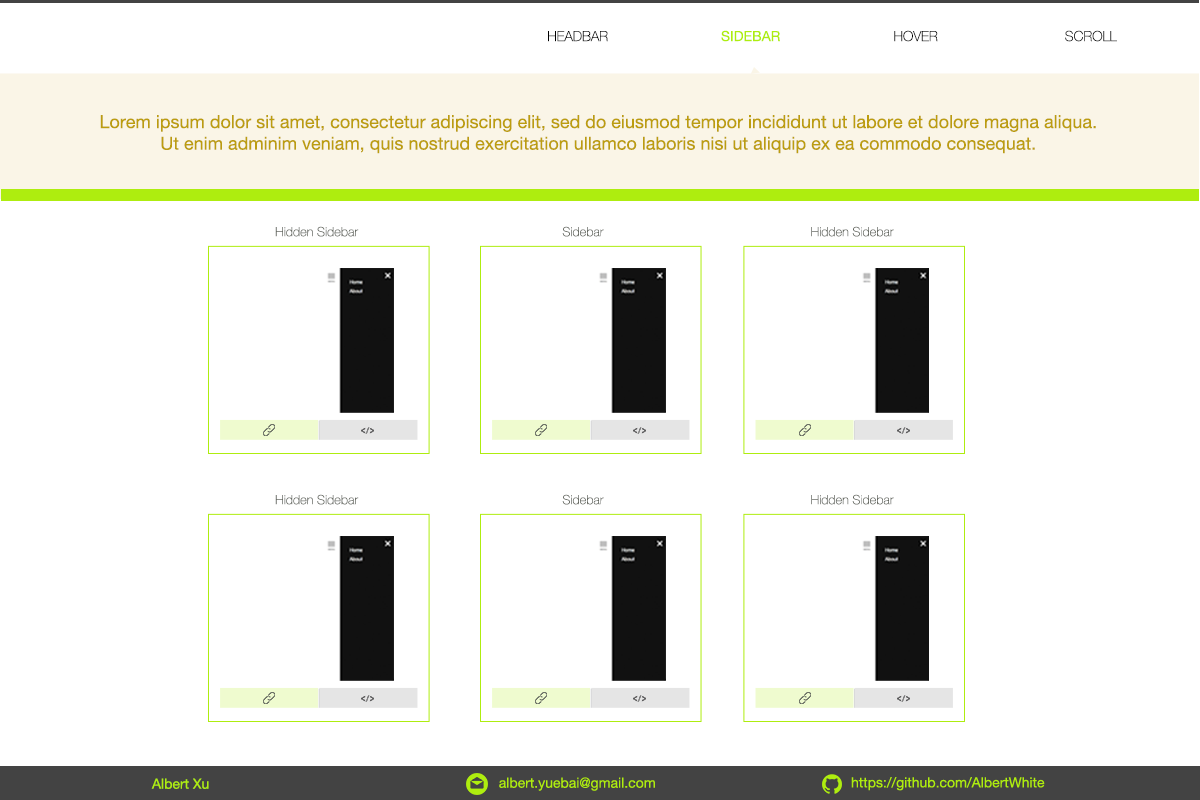
<style>
.page{position:relative;width:1200px;height:800px;background:#ffffff}
.page>*{position:absolute;margin:0}
.t1{font:14px "HelveticaNeue";color:#aeed0f}
.t2{font:14px "HelveticaNeue-Thin";color:#000000}
.t3{font:14px "HelveticaNeue-Thin";color:#232323}
.t4{font:18px "HelveticaNeue";color:#bc9d0f}
.t5{font:12.8px "HelveticaNeue-Thin";color:#6d7069}
.t6{font:12.8px "HelveticaNeue-Thin";color:#60645c}
</style>
<div class="page">
<p class="t1" style="left:721px;top:30px;width:59px;height:12px">SIDEBAR</p>
<p class="t2" style="left:894px;top:30px;width:44px;height:12px">HOVER</p>
<p class="t3" style="left:1065px;top:30px;width:52px;height:12px">SCROLL</p>
<p class="t2" style="left:548px;top:31px;width:60px;height:11px">HEADBAR</p>
<p class="t4" style="left:100px;top:115px;width:996px;height:39px;text-align:center">Lorem ipsum dolor sit amet, consectetur adipiscing elit, sed do eiusmod tempor incididunt ut labore et dolore magna aliqua. <br>Ut enim adminim veniam, quis nostrud exercitation ullamco laboris nisi ut aliquip ex ea commodo consequat.</p>
<p class="t5" style="left:275px;top:226px;width:84px;height:11px">Hidden Sidebar</p>
<p class="t6" style="left:562px;top:226px;width:42px;height:11px">Sidebar</p>
<p class="t6" style="left:811px;top:226px;width:83px;height:11px">Hidden Sidebar</p>
<p class="t5" style="left:275px;top:494px;width:84px;height:11px">Hidden Sidebar</p>
<p class="t6" style="left:562px;top:494px;width:42px;height:11px">Sidebar</p>
<p class="t6" style="left:811px;top:494px;width:83px;height:11px">Hidden Sidebar</p>
<p class="t1" style="left:151px;top:778px;width:58px;height:11px">Albert Xu</p>
<p class="t1" style="left:499px;top:777px;width:156px;height:14px">albert.yuebai@gmail.com</p>
<p class="t1" style="left:851px;top:777px;width:194px;height:14px">https://github.com/AlbertWhite</p>
</div>
